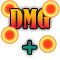
<style>
.page{position:relative;width:60px;height:60px;background:#ffffff}
.page>*{position:absolute;margin:0}
.t1{font:24px "BernardMT-Condensed"}
</style>
<div class="page">
<p class="t1" style="left:10px;top:8px;width:40px;height:46px">DMG<br>  +</p>
</div>
